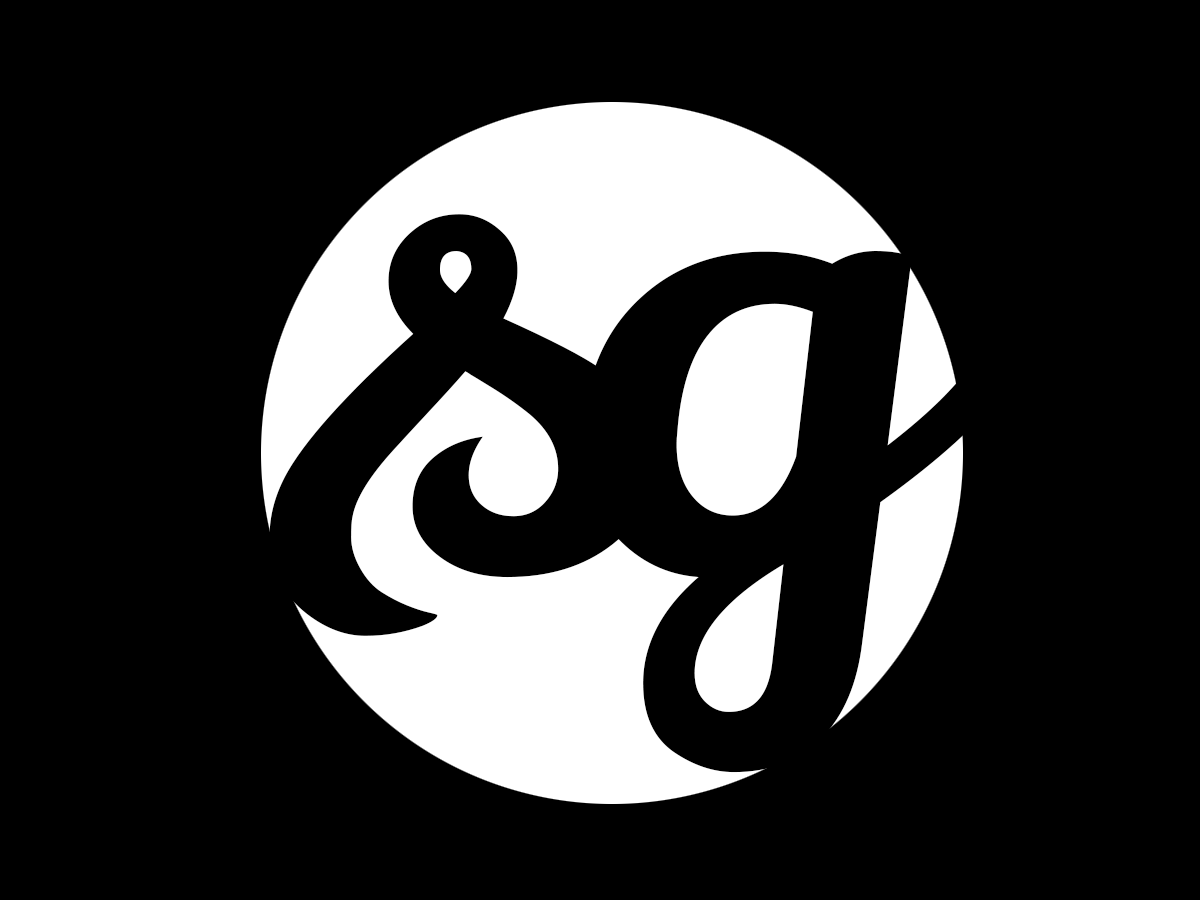
<style>
.page{position:relative;width:1200px;height:900px;background:#000000}
.page>*{position:absolute;margin:0}
.t1{font:668px "LilyScriptOne-Regular";letter-spacing:-0.12em;color:#000000}
</style>
<div class="page">
<p class="t1" style="left:269px;top:214px;width:713px;height:559px">sg</p>
</div>
